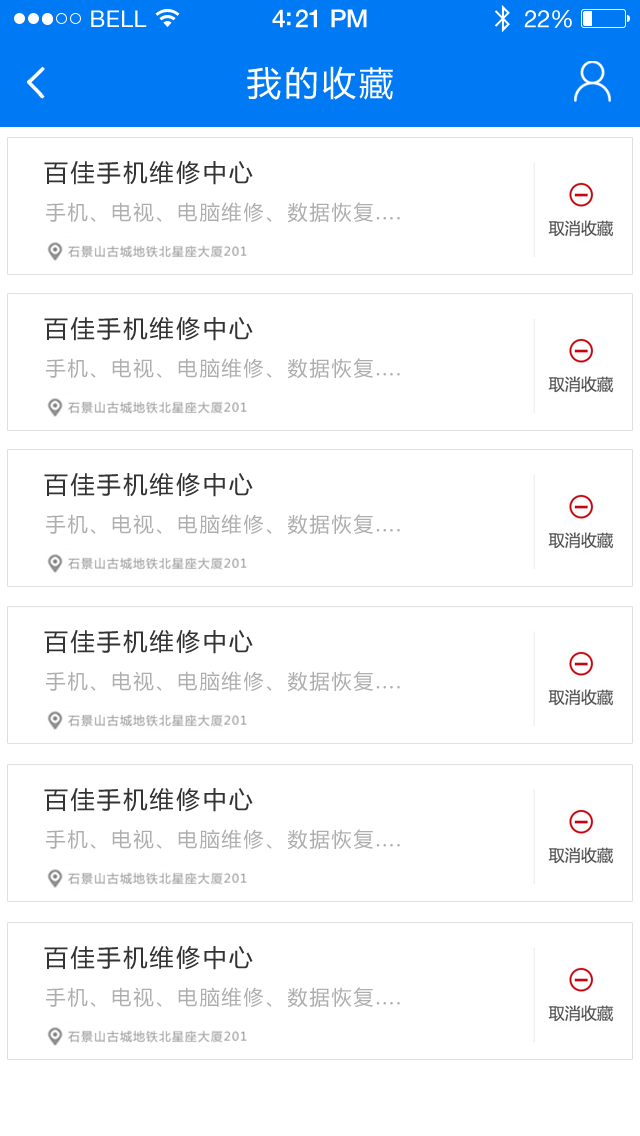
<style>
.page{position:relative;width:640px;height:1136px;background:#ffffff}
.page>*{position:absolute;margin:0}
.t1{font:23px "HelveticaNeue";letter-spacing:0.02em;color:#ffffff}
.t2{font:25px "HelveticaNeue-Medium";letter-spacing:-0.02em;color:#ffffff}
.t3{font:24px "HelveticaNeue";letter-spacing:-0.02em;color:#ffffff}
.t4{font:34px "MicrosoftYaHei";letter-spacing:0.1em;color:#ffffff}
.t5{font:24px "MicrosoftYaHei";letter-spacing:0.1em;color:#333333}
.t6{font:20px "MicrosoftYaHei";letter-spacing:0.1em;color:#aeaeae}
</style>
<div class="page">
<p class="t1" style="left:91px;top:10px;width:56px;height:17px">BELL</p>
<p class="t2" style="left:272px;top:9px;width:95px;height:19px">4:21 PM</p>
<p class="t3" style="left:524px;top:10px;width:48px;height:18px">22%</p>
<p class="t4" style="left:247px;top:66px;width:146px;height:34px">我的收藏</p>
<p class="t5" style="left:44px;top:161px;width:209px;height:24px">百佳手机维修中心</p>
<p class="t6" style="left:46px;top:202px;width:354px;height:21px">手机、电视、电脑维修、数据恢复....</p>
<p class="t5" style="left:44px;top:317px;width:209px;height:24px">百佳手机维修中心</p>
<p class="t6" style="left:46px;top:358px;width:354px;height:21px">手机、电视、电脑维修、数据恢复....</p>
<p class="t5" style="left:44px;top:473px;width:209px;height:24px">百佳手机维修中心</p>
<p class="t6" style="left:46px;top:514px;width:354px;height:21px">手机、电视、电脑维修、数据恢复....</p>
<p class="t5" style="left:44px;top:630px;width:209px;height:24px">百佳手机维修中心</p>
<p class="t6" style="left:46px;top:671px;width:354px;height:21px">手机、电视、电脑维修、数据恢复....</p>
<p class="t5" style="left:44px;top:788px;width:209px;height:24px">百佳手机维修中心</p>
<p class="t6" style="left:46px;top:829px;width:354px;height:21px">手机、电视、电脑维修、数据恢复....</p>
<p class="t5" style="left:44px;top:946px;width:209px;height:24px">百佳手机维修中心</p>
<p class="t6" style="left:46px;top:987px;width:354px;height:21px">手机、电视、电脑维修、数据恢复....</p>
</div>
